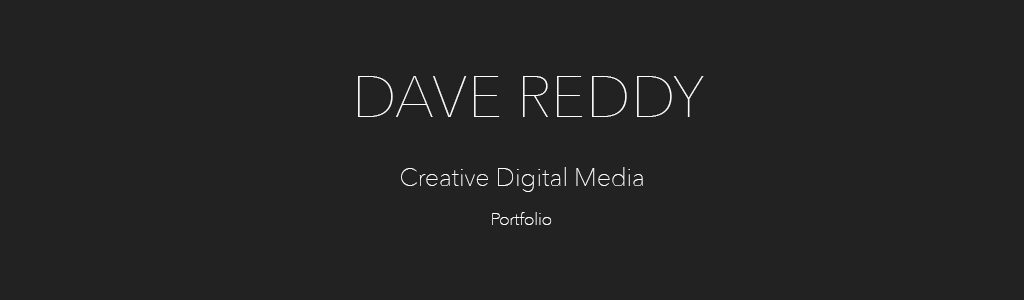
<style>
.page{position:relative;width:1024px;height:300px;background:#222222}
.page>*{position:absolute;margin:0}
.t1{font:58.3px "AvenirNext-UltraLight";color:#ffffff}
.t2{font:25px "AvenirNext-UltraLight";color:#ffffff}
.t3{font:16.7px "AvenirNext-UltraLight";color:#ffffff}
</style>
<div class="page">
<p class="t1" style="left:358px;top:76px;width:346px;height:41px">DAVE REDDY</p>
<p class="t2" style="left:401px;top:167px;width:242px;height:25px">Creative Digital Media</p>
<p class="t3" style="left:492px;top:212px;width:60px;height:13px">Portfolio</p>
</div>
